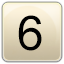
<style>
.page{position:relative;width:64px;height:64px}
.page>*{position:absolute;margin:0}
.t1{font:48px "ArialMT";color:#000000}
</style>
<div class="page">
<p class="t1" style="left:18px;top:15px;width:24px;height:36px">6</p>
</div>
